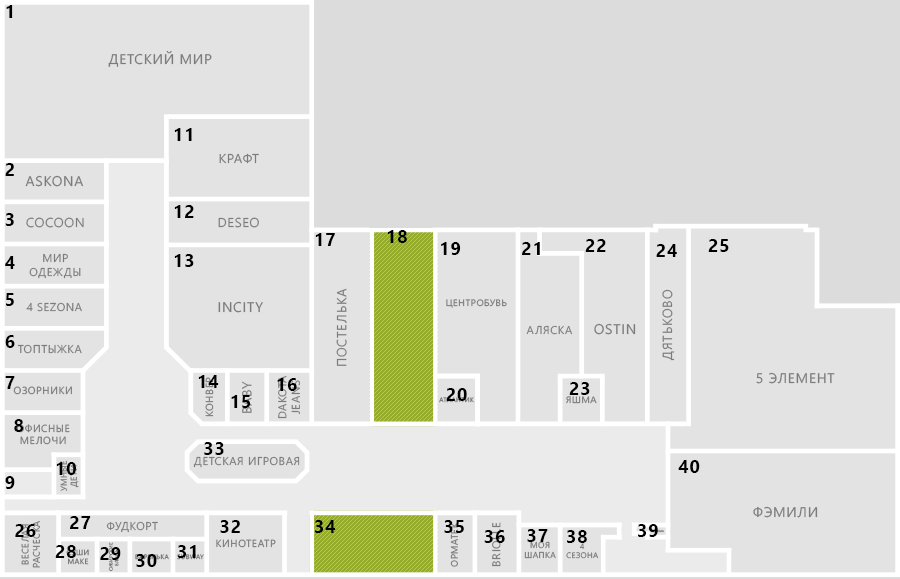
<style>
.page{position:relative;width:900px;height:579px;background:#e3e3e3}
.page>*{position:absolute;margin:0}
.t1{font:18px "SegoeUI-Bold";letter-spacing:0.05em;color:#000000;text-transform:uppercase}
.t2{font:14px "SegoeUI";letter-spacing:0.05em;color:#7c7c7c;text-transform:uppercase}
.t3{font:13.1px "SegoeUI";letter-spacing:0.05em;color:#7c7c7c;text-transform:uppercase}
.t4{font:11.2px "SegoeUI";letter-spacing:0.05em;color:#7c7c7c;text-transform:uppercase}
.t5{font:9.4px "SegoeUI";letter-spacing:0.05em;text-transform:uppercase}
.t6{font:10.3px "SegoeUI";letter-spacing:0.05em;color:#7c7c7c;text-transform:uppercase}
.t7{font:13.1px "SegoeUI";letter-spacing:0.05em;text-transform:uppercase}
.t8{font:6.6px "SegoeUI";letter-spacing:0.05em;text-transform:uppercase}
.t9{font:9.4px "SegoeUI";letter-spacing:0.05em;color:#7c7c7c;text-transform:uppercase}
.t10{font:2.8px "SegoeUI";letter-spacing:0.05em;text-transform:uppercase}
.t11{font:8.4px "SegoeUI";letter-spacing:0.05em;color:#7c7c7c;text-transform:uppercase}
.t12{font:8px "SegoeUI";letter-spacing:0.05em;text-transform:uppercase}
.t13{font:7.5px "SegoeUI";letter-spacing:0.05em;color:#7c7c7c;text-transform:uppercase}
.t14{font:6.6px "SegoeUI";letter-spacing:0.05em;color:#7c7c7c;text-transform:uppercase}
</style>
<div class="page">
<p class="t1" style="left:6px;top:5px;width:7px;height:13px">1</p>
<p class="t2" style="left:108px;top:50px;width:104px;height:17px">Детский мир</p>
<p class="t1" style="left:174px;top:128px;width:18px;height:13px">11</p>
<p class="t3" style="left:219px;top:153px;width:40px;height:11px">Крафт</p>
<p class="t1" style="left:5px;top:163px;width:9px;height:13px">2</p>
<p class="t2" style="left:25px;top:175px;width:59px;height:12px">Askona</p>
<p class="t1" style="left:174px;top:205px;width:20px;height:13px">12</p>
<p class="t1" style="left:5px;top:213px;width:9px;height:13px">3</p>
<p class="t3" style="left:26px;top:217px;width:58px;height:11px">Cocoon</p>
<p class="t3" style="left:218px;top:217px;width:41px;height:11px">Deseo</p>
<p class="t1" style="left:315px;top:233px;width:20px;height:13px">17</p>
<p class="t1" style="left:387px;top:230px;width:20px;height:13px">18</p>
<p class="t1" style="left:441px;top:242px;width:20px;height:13px">19</p>
<p class="t1" style="left:522px;top:242px;width:18px;height:13px">21</p>
<p class="t1" style="left:585px;top:239px;width:21px;height:13px">22</p>
<p class="t1" style="left:656px;top:244px;width:21px;height:13px">24</p>
<p class="t1" style="left:708px;top:239px;width:21px;height:13px">25</p>
<p class="t1" style="left:5px;top:256px;width:10px;height:13px">4</p>
<p class="t4" style="left:29px;top:253px;width:52px;height:26px;text-align:center">Мир<br>одежды</p>
<p class="t1" style="left:174px;top:254px;width:20px;height:13px">13</p>
<p class="t1" style="left:6px;top:293px;width:8px;height:13px">5</p>
<p class="t3" style="left:336px;top:288px;width:11px;height:78px;rotate:-90deg">Постелька</p>
<p class="t3" style="left:662px;top:289px;width:13px;height:72px;rotate:-90deg">Дятьково</p>
<p class="t4" style="left:26px;top:302px;width:56px;height:10px">4 SEZONA</p>
<p class="t2" style="left:218px;top:301px;width:45px;height:12px">Incity</p>
<p class="t5" style="left:446px;top:299px;width:61px;height:9px">ЦентрОбувь</p>
<p class="t4" style="left:526px;top:325px;width:47px;height:10px">Аляска</p>
<p class="t2" style="left:594px;top:323px;width:42px;height:12px">Ostin</p>
<p class="t1" style="left:5px;top:335px;width:10px;height:13px">6</p>
<p class="t4" style="left:17px;top:344px;width:65px;height:10px">Топтыжка</p>
<p class="t1" style="left:5px;top:376px;width:10px;height:13px">7</p>
<p class="t1" style="left:198px;top:375px;width:21px;height:13px">14</p>
<p class="t6" style="left:205px;top:377px;width:9px;height:40px;rotate:-90deg">Конвер</p>
<p class="t4" style="left:278px;top:375px;width:23px;height:44px;text-align:center;rotate:-90deg">Dakota<br>Jeans</p>
<p class="t2" style="left:756px;top:372px;width:79px;height:12px">5 элемент</p>
<p class="t6" style="left:13px;top:386px;width:59px;height:9px">Озорники</p>
<p class="t7" style="left:242px;top:381px;width:10px;height:32px;rotate:-90deg">Baby</p>
<p class="t1" style="left:277px;top:378px;width:20px;height:13px">16</p>
<p class="t1" style="left:446px;top:388px;width:21px;height:13px">20</p>
<p class="t1" style="left:569px;top:382px;width:21px;height:13px">23</p>
<p class="t1" style="left:231px;top:395px;width:20px;height:13px">15</p>
<p class="t8" style="left:439px;top:397px;width:35px;height:6px">Атлантик</p>
<p class="t9" style="left:566px;top:396px;width:31px;height:8px">Яшма</p>
<p class="t1" style="left:14px;top:419px;width:10px;height:13px">8</p>
<p class="t6" style="left:16px;top:424px;width:54px;height:21px;text-align:center">Офисные<br>мелочи</p>
<p class="t1" style="left:204px;top:442px;width:20px;height:13px">33</p>
<p class="t1" style="left:56px;top:462px;width:20px;height:13px">10</p>
<p class="t4" style="left:193px;top:456px;width:107px;height:12px">Детская игровая</p>
<p class="t1" style="left:678px;top:460px;width:22px;height:13px">40</p>
<p class="t1" style="left:5px;top:476px;width:10px;height:13px">9</p>
<p class="t2" style="left:753px;top:506px;width:65px;height:12px">Фэмили</p>
<p class="t9" style="left:21px;top:521px;width:19px;height:47px;text-align:center;rotate:-90deg">Веселая<br>расческа</p>
<p class="t1" style="left:70px;top:516px;width:21px;height:13px">27</p>
<p class="t4" style="left:106px;top:521px;width:52px;height:12px">Фудкорт</p>
<p class="t1" style="left:220px;top:520px;width:20px;height:13px">32</p>
<p class="t1" style="left:315px;top:520px;width:21px;height:13px">34</p>
<p class="t1" style="left:444px;top:520px;width:20px;height:13px">35</p>
<p class="t1" style="left:15px;top:524px;width:21px;height:13px">26</p>
<p class="t5" style="left:450px;top:522px;width:8px;height:45px;rotate:-90deg">Орматек</p>
<p class="t1" style="left:484px;top:530px;width:21px;height:13px">36</p>
<p class="t4" style="left:492px;top:522px;width:9px;height:45px;rotate:-90deg">Briolle</p>
<p class="t1" style="left:527px;top:529px;width:21px;height:13px">37</p>
<p class="t1" style="left:567px;top:530px;width:20px;height:13px">38</p>
<p class="t1" style="left:638px;top:524px;width:20px;height:13px">39</p>
<p class="t10" style="left:650px;top:529px;width:14px;height:4px">Teskoma</p>
<p class="t1" style="left:55px;top:545px;width:21px;height:13px">28</p>
<p class="t1" style="left:178px;top:545px;width:18px;height:13px">31</p>
<p class="t6" style="left:216px;top:539px;width:60px;height:9px">Кинотеатр</p>
<p class="t11" style="left:524px;top:541px;width:32px;height:18px;text-align:center">Моя<br>шапка</p>
<p class="t12" style="left:566px;top:543px;width:33px;height:16px;text-align:center">4<br>сезона</p>
<p class="t13" style="left:66px;top:549px;width:23px;height:16px;text-align:center">Суши<br>маке</p>
<p class="t1" style="left:100px;top:547px;width:21px;height:13px">29</p>
<p class="t1" style="left:136px;top:554px;width:21px;height:13px">30</p>
<p class="t14" style="left:177px;top:554px;width:27px;height:6px">Subway</p>
</div>
